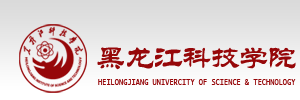
<style>
.page{position:relative;width:300px;height:100px}
.page>*{position:absolute;margin:0}
.t1{font:30px "STLiti";letter-spacing:-0.05em;color:#960709}
.t2{font:7px "Monaco";color:#960709}
</style>
<div class="page">
<p class="t1" style="left:97px;top:47px;width:199px;height:23px">黑龙江科技学院</p>
<p class="t2" style="left:98px;top:79px;width:198px;height:6px">HEILONGJIANG UNIVERCITY OF SCIENCE &amp; TECHNOLOGY</p>
</div>
